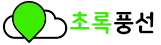
<style>
.page{position:relative;width:161px;height:45px;background:#ffffff}
.page>*{position:absolute;margin:0}
.t1{font:24px "DalseoHealingBold";color:#3ded00}
.t2{font:24px "DalseoHealingBold";color:#000000}
</style>
<div class="page">
<p class="t1" style="left:70px;top:11px;width:84px;height:24px">초록<span class="t2">풍선</span></p>
</div>
